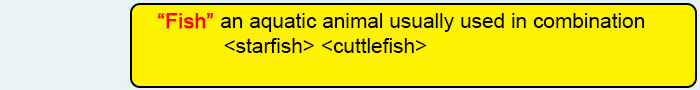
<style>
.page{position:relative;width:700px;height:90px;background:#fff200}
.page>*{position:absolute;margin:0}
.t1{font:20.8px "ArialMT";color:#020202}
.t2{font:20.8px "ArialMT";color:#fd010d}
.t3{font:20.8px "ArialMT";color:#fd010d;font-weight:bold}
</style>
<div class="page">
<p class="t1" style="left:158px;top:13px;width:487px;height:40px"><span class="t2"> </span><span class="t3">“Fish” </span>an aquatic animal usually used in combination <br>  &lt;starfish&gt; &lt;cuttlefish&gt;</p>
</div>
